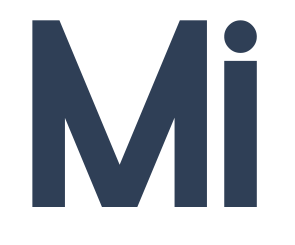
<style>
.page{position:relative;width:295px;height:245px;background:#ffffff}
.page>*{position:absolute;margin:0}
.t1{font:229.2px "YaroRg-Bold";color:#2f3f56}
</style>
<div class="page">
<p class="t1" style="left:32px;top:20px;width:225px;height:187px">Mi</p>
</div>
